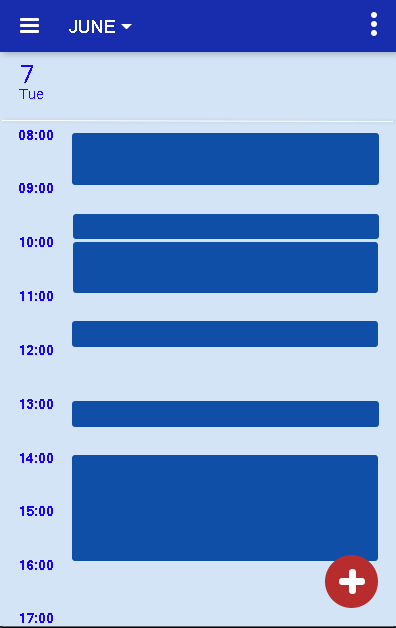
<style>
.page{position:relative;width:396px;height:628px;background:#d4e4f7}
.page>*{position:absolute;margin:0}
.t1{font:18px "Kartika";color:#ffffff}
.t2{font:14px "Kartika";color:#1e00ff}
.t3{font:24px "Kartika";color:#1e00ff}
.t4{font:14px "Kartika-Bold";color:#1e00ff}
</style>
<div class="page">
<p class="t1" style="left:69px;top:20px;width:46px;height:13px">JUNE</p>
<p class="t2" style="left:19px;top:65px;width:24px;height:34px;text-align:center"><span class="t3">7<br></span> Tue</p>
<p class="t4" style="left:19px;top:130px;width:34px;height:10px">08:00</p>
<p class="t4" style="left:19px;top:183px;width:34px;height:10px">09:00</p>
<p class="t4" style="left:20px;top:237px;width:33px;height:10px">10:00</p>
<p class="t4" style="left:20px;top:291px;width:33px;height:10px">11:00</p>
<p class="t4" style="left:20px;top:345px;width:33px;height:10px">12:00</p>
<p class="t4" style="left:20px;top:399px;width:33px;height:10px">13:00</p>
<p class="t4" style="left:20px;top:453px;width:33px;height:10px">14:00</p>
<p class="t4" style="left:20px;top:506px;width:33px;height:10px">15:00</p>
<p class="t4" style="left:20px;top:560px;width:33px;height:10px">16:00</p>
<p class="t4" style="left:20px;top:613px;width:33px;height:10px">17:00</p>
</div>
